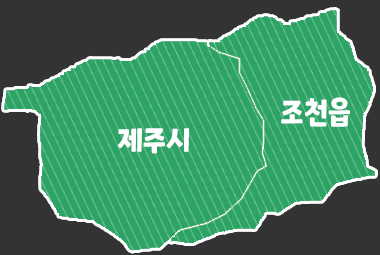
<style>
.page{position:relative;width:380px;height:255px;background:#2da365}
.page>*{position:absolute;margin:0}
.t1{font:30.5px "ONEMobilePOPRegular";color:#ffffff;scale:0.93 1}
</style>
<div class="page">
<p class="t1" style="left:281px;top:97px;width:69px;height:30px">조천읍</p>
<p class="t1" style="left:118px;top:128px;width:71px;height:26px">제주시</p>
</div>
